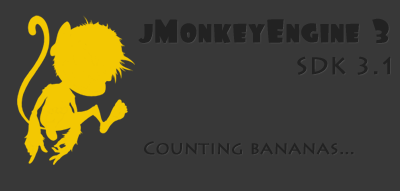
<style>
.page{position:relative;width:400px;height:191px;background:#383838}
.page>*{position:absolute;margin:0}
.t1{font:30px "Foo";color:#222222}
.t2{font:24px "LithosPro-Regular";color:#222222;font-weight:bold}
.t3{font:18px "LithosPro-Regular";color:#222222;font-weight:bold}
</style>
<div class="page">
<p class="t1" style="left:138px;top:18px;width:251px;height:25px">jMonkeyEngine 3</p>
<p class="t2" style="left:297px;top:56px;width:94px;height:19px">SDK 3.1</p>
<p class="t3" style="left:144px;top:141px;width:210px;height:14px">Counting bananas...</p>
</div>
